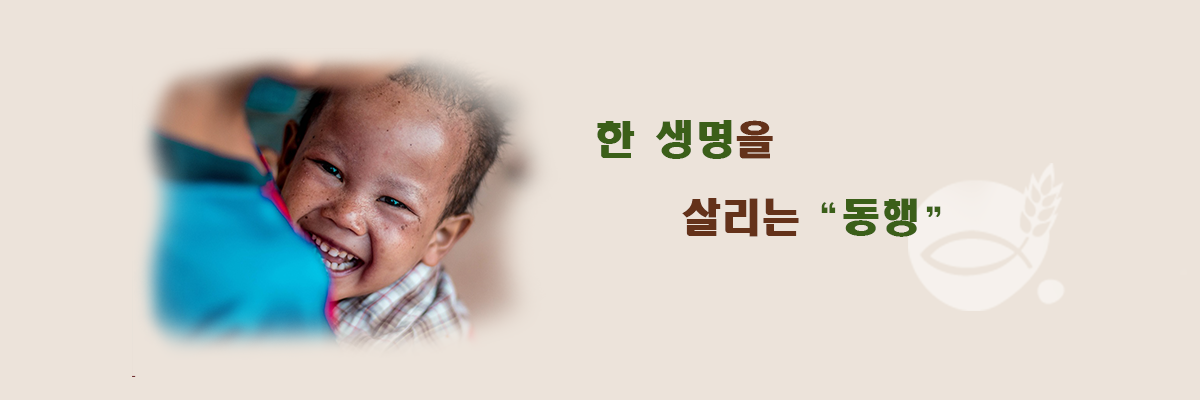
<style>
.page{position:relative;width:1200px;height:400px;background:#ece3da}
.page>*{position:absolute;margin:0}
.t1{font:40px "HeadlineR-HM";color:#3b5f19}
.t2{font:40px "HeadlineR-HM";color:#64321a}
</style>
<div class="page">
<p class="t1" style="left:597px;top:120px;width:176px;height:39px">한 생명<span class="t2">을</span></p>
<p class="t1" style="left:682px;top:198px;width:259px;height:39px"><span class="t2">살리는 </span>“동행”</p>
</div>
